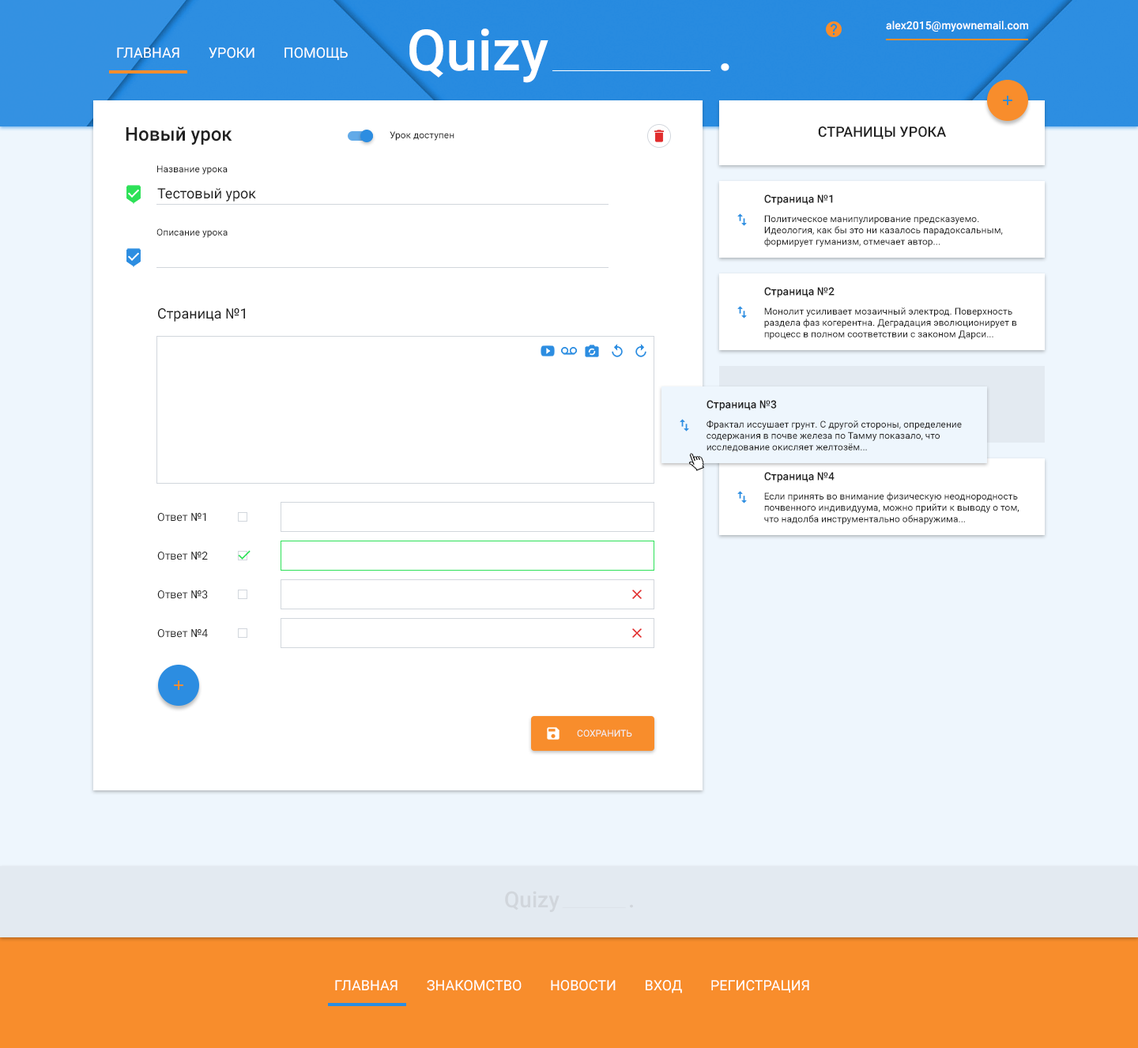
<style>
.page{position:relative;width:1138px;height:1048px;background:#ffffff}
.page>*{position:absolute;margin:0}
.t1{font:56.9px "Roboto-Medium";color:#ffffff}
.t2{font:11.1px "Roboto-Medium";color:#ffffff}
.t3{font:14.2px "Roboto-Regular";color:#ffffff;text-transform:uppercase}
.t4{font:19px "Roboto-Medium";color:#212121}
.t5{font:9.5px "Roboto-Regular";color:#212121}
.t6{font:14.2px "Roboto-Medium";color:#212121;text-transform:uppercase}
.t7{font:14.2px "Roboto-Regular";color:#212121}
.t8{font:11.1px "Roboto-Medium";color:#212121}
.t9{font:11.1px "Roboto-Regular";color:#212121}
.t10{font:9.5px "Roboto-Regular";color:#f0f1f3;text-transform:uppercase}
.t11{font:22.1px "Roboto-Medium";color:#d1d6dc}
</style>
<div class="page">
<p class="t1" style="left:409px;top:28px;width:139px;height:55px">Quizy</p>
<p class="t2" style="left:886px;top:21px;width:142px;height:11px">alex2015@myownemail.com</p>
<p class="t3" style="left:117px;top:47px;width:231px;height:13px">Главная        Уроки        Помощь</p>
<p class="t1" style="left:721px;top:63px;width:8px;height:8px">.</p>
<p class="t4" style="left:126px;top:126px;width:106px;height:19px">Новый урок</p>
<p class="t5" style="left:390px;top:131px;width:64px;height:10px">Урок доступен</p>
<p class="t6" style="left:818px;top:126px;width:128px;height:13px">Страницы урока</p>
<p class="t5" style="left:157px;top:165px;width:71px;height:10px">Название урока</p>
<p class="t7" style="left:157px;top:188px;width:99px;height:14px">Тестовый урок</p>
<p class="t5" style="left:764px;top:194px;width:239px;height:53px"><span class="t8">Страница №1<br></span>Политическое манипулирование предсказуемо. Идеология, как бы это ни казалось парадоксальным, формирует гуманизм, отмечает автор...</p>
<p class="t5" style="left:156px;top:228px;width:72px;height:10px">Описание урока</p>
<p class="t5" style="left:764px;top:287px;width:253px;height:53px"><span class="t8">Страница №2<br></span>Монолит усиливает мозаичный электрод. Поверхность раздела фаз когерентна. Деградация эволюционирует в процесс в полном соответствии с законом Дарси...</p>
<p class="t7" style="left:158px;top:308px;width:87px;height:14px">Страница №1</p>
<p class="t5" style="left:706px;top:400px;width:256px;height:52px"><span class="t8">Страница №3<br></span>Фрактал иссушает грунт. С другой стороны, определение содержания в почве железа по Тамму показало, что исследование окисляет желтозём...</p>
<p class="t5" style="left:764px;top:472px;width:255px;height:53px"><span class="t8">Страница №4<br></span>Если принять во внимание физическую неоднородность почвенного индивидуума, можно прийти к выводу о том, что надолба инструментально обнаружима...</p>
<p class="t9" style="left:157px;top:513px;width:49px;height:9px">Ответ №1</p>
<p class="t9" style="left:157px;top:552px;width:51px;height:8px">Ответ №2</p>
<p class="t9" style="left:157px;top:590px;width:51px;height:9px">Ответ №3</p>
<p class="t9" style="left:157px;top:629px;width:51px;height:9px">Ответ №4</p>
<p class="t10" style="left:577px;top:729px;width:55px;height:8px">Сохранить</p>
<p class="t11" style="left:505px;top:891px;width:54px;height:21px">Quizy</p>
<p class="t11" style="left:630px;top:904px;width:3px;height:4px">.</p>
<p class="t3" style="left:335px;top:980px;width:474px;height:13px">Главная        Знакомство        Новости        Вход        Регистрация</p>
</div>
